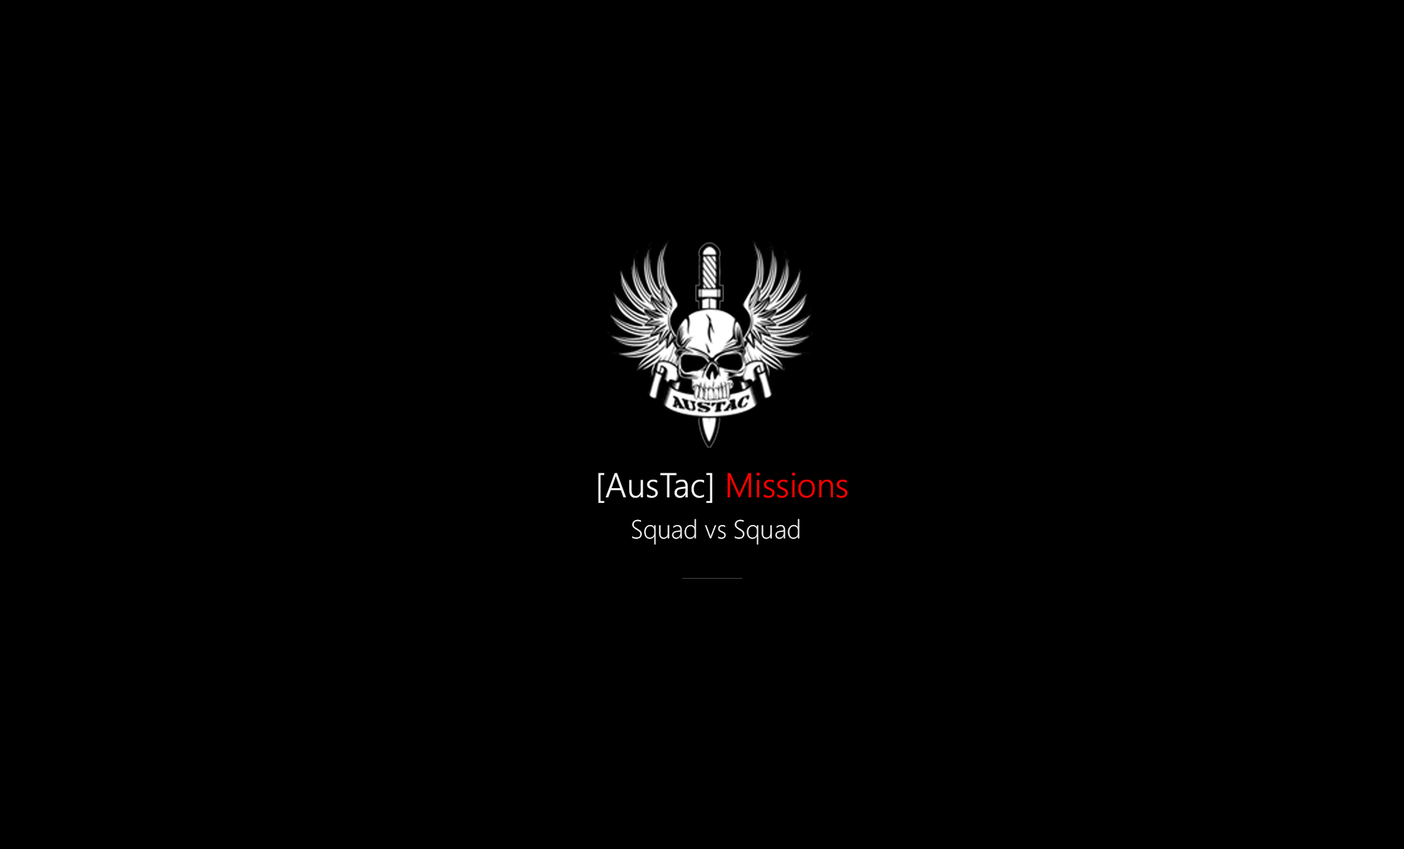
<style>
.page{position:relative;width:1404px;height:849px;background:#000000}
.page>*{position:absolute;margin:0}
.t1{font:34.6px "SegoeUI-Semilight";color:#fcf9f9}
.t2{font:34.6px "SegoeUI-Semilight";color:#ff0000}
.t3{font:26px "SegoeUI-Light";color:#fcf9f9}
</style>
<div class="page">
<p class="t1" style="left:598px;top:473px;width:250px;height:30px">[AusTac] <span class="t2">Missions</span></p>
<p class="t3" style="left:632px;top:519px;width:168px;height:26px">Squad vs Squad</p>
</div>
